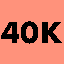
<style>
.page{position:relative;width:64px;height:64px;background:#ff927b}
.page>*{position:absolute;margin:0}
.t1{font:28.3px "Futura-Bold";color:#000000}
</style>
<div class="page">
<p class="t1" style="left:1px;top:21px;width:61px;height:23px">40K</p>
</div>
